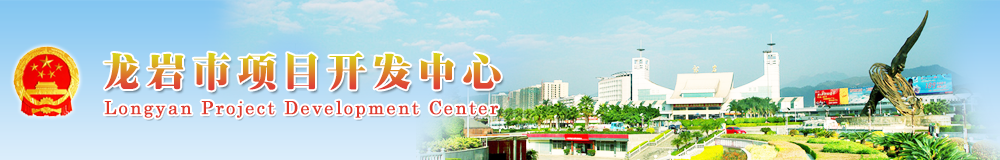
<style>
.page{position:relative;width:1000px;height:160px}
.page>*{position:absolute;margin:0}
.t1{font:42px "RS_CuBiao";letter-spacing:0.075em}
.t2{font:18px "Century";letter-spacing:0.11em;color:#df3a2d;font-weight:bold}
</style>
<div class="page">
<p class="t1" style="left:104px;top:52px;width:397px;height:39px">龙岩市项目开发中心</p>
<p class="t2" style="left:104px;top:100px;width:394px;height:18px">Longyan Project Development Center</p>
</div>
